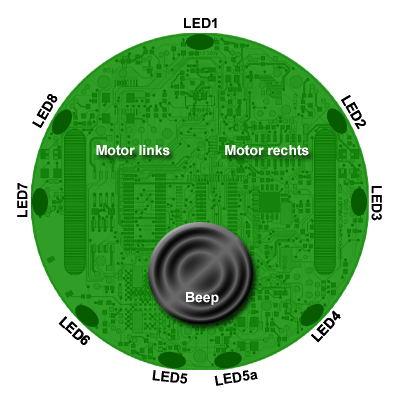
<style>
.page{position:relative;width:400px;height:400px;background:#ffffff}
.page>*{position:absolute;margin:0}
.t1{font:14px "Arial-BoldMT";color:#000000}
.t2{font:14px "Arial-BoldMT";color:#ffffff}
</style>
<div class="page">
<p class="t1" style="left:184px;top:18px;width:33px;height:10px">LED1</p>
<p class="t1" style="left:32px;top:94px;width:26px;height:34px;rotate:-60deg">LED8</p>
<p class="t1" style="left:341px;top:95px;width:25px;height:35px;rotate:60deg">LED2</p>
<p class="t2" style="left:96px;top:145px;width:74px;height:11px">Motor links</p>
<p class="t2" style="left:225px;top:145px;width:84px;height:11px">Motor rechts</p>
<p class="t1" style="left:17px;top:183px;width:11px;height:34px;rotate:-90deg">LED7</p>
<p class="t1" style="left:371px;top:186px;width:11px;height:35px;rotate:90deg">LED3</p>
<p class="t2" style="left:186px;top:292px;width:33px;height:13px">Beep</p>
<p class="t1" style="left:58px;top:316px;width:32px;height:29px;rotate:42deg">LED6</p>
<p class="t1" style="left:311px;top:310px;width:30px;height:33px;rotate:-47deg">LED4</p>
<p class="t1" style="left:152px;top:370px;width:36px;height:14px;rotate:6deg">LED5</p>
<p class="t1" style="left:214px;top:370px;width:44px;height:16px;rotate:-9deg">LED5a</p>
</div>
